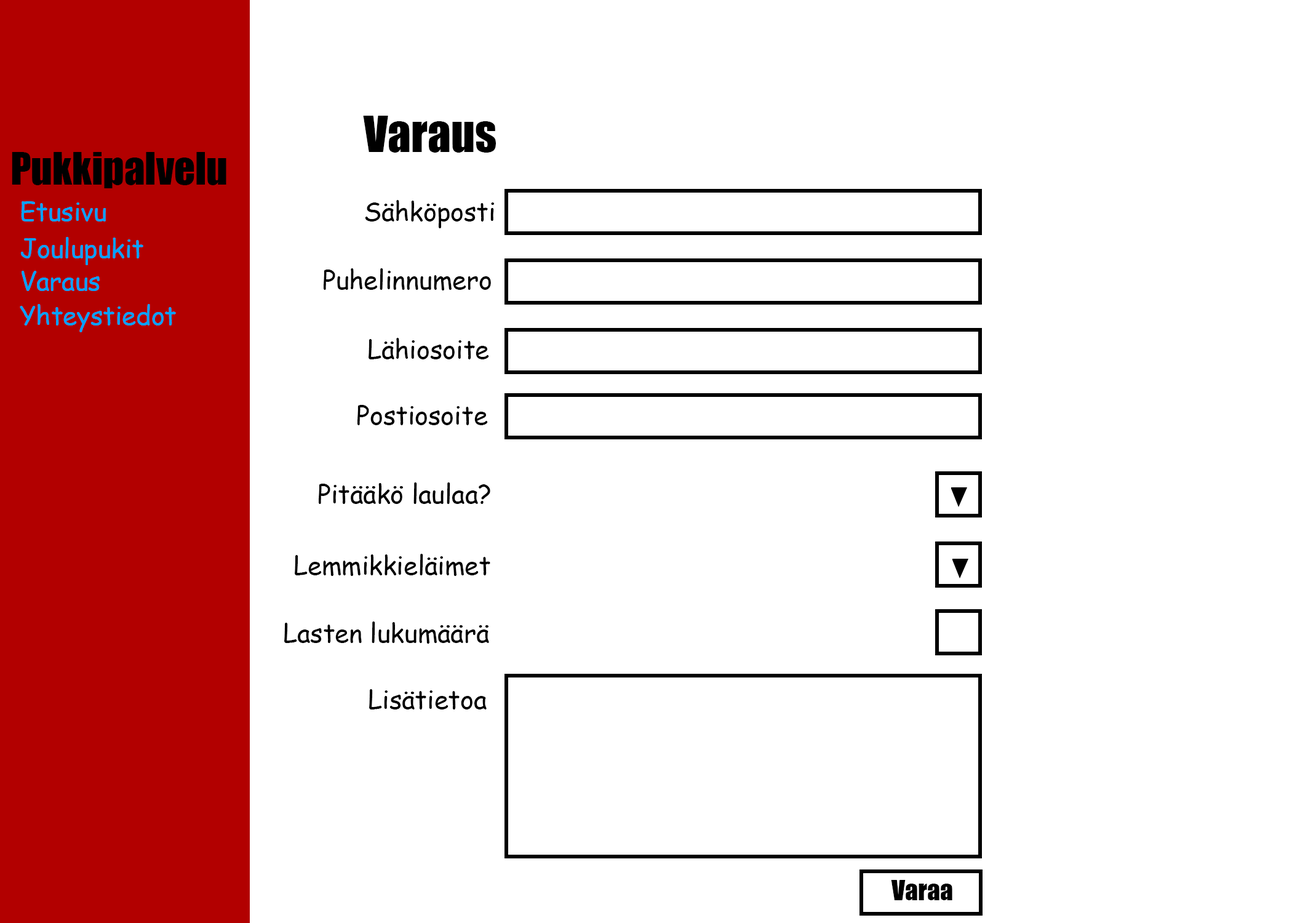
<style>
.page{position:relative;width:1292px;height:923px;background:#ffffff}
.page>*{position:absolute;margin:0}
.t1{font:46.1px "Impact";color:#000000}
.t2{font:41px "Impact";color:#000000}
.t3{font:25.6px "ComicSansMS";color:#00a2ff}
.t4{font:25.6px "ComicSansMS";color:#000000}
.t5{font:25.6px "Impact";color:#000000}
</style>
<div class="page">
<p class="t1" style="left:363px;top:116px;width:133px;height:37px">Varaus</p>
<p class="t2" style="left:12px;top:152px;width:214px;height:36px">Pukkipalvelu</p>
<p class="t3" style="left:21px;top:201px;width:85px;height:20px">Etusivu</p>
<p class="t4" style="left:365px;top:200px;width:129px;height:28px">Sähköposti</p>
<p class="t3" style="left:20px;top:237px;width:123px;height:28px">Joulupukit</p>
<p class="t4" style="left:324px;top:268px;width:167px;height:22px">Puhelinnumero</p>
<p class="t3" style="left:22px;top:271px;width:78px;height:20px">Varaus</p>
<p class="t3" style="left:20px;top:304px;width:156px;height:28px">Yhteystiedot</p>
<p class="t4" style="left:369px;top:338px;width:120px;height:21px">Lähiosoite</p>
<p class="t4" style="left:357px;top:405px;width:131px;height:20px">Postiosoite</p>
<p class="t4" style="left:319px;top:482px;width:171px;height:22px">Pitääkö laulaa?</p>
<p class="t4" style="left:295px;top:554px;width:195px;height:22px">Lemmikkieläimet</p>
<p class="t4" style="left:284px;top:621px;width:205px;height:23px">Lasten lukumäärä</p>
<p class="t4" style="left:369px;top:689px;width:118px;height:20px">Lisätietoa</p>
<p class="t5" style="left:891px;top:880px;width:61px;height:20px">Varaa</p>
</div>
